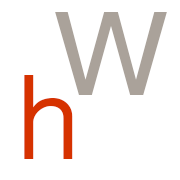
<style>
.page{position:relative;width:180px;height:180px;background:#ffffff}
.page>*{position:absolute;margin:0}
.t1{font:166.7px "LaoSangamMN";color:#aaa29a}
.t2{font:120px "LaoSangamMN";color:#d63200}
</style>
<div class="page">
<p class="t1" style="left:55px;top:12px;width:112px;height:83px">w</p>
<p class="t2" style="left:24px;top:75px;width:49px;height:84px">h</p>
</div>
